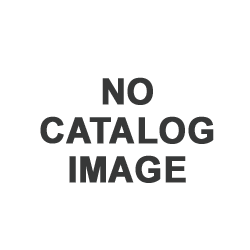
<style>
.page{position:relative;width:250px;height:250px;background:#ffffff}
.page>*{position:absolute;margin:0}
.t1{font:36px/39px "Arial-BoldMT";color:#373838;font-weight:bold}
</style>
<div class="page">
<p class="t1" style="left:40px;top:77px;width:174px;height:106px;text-align:center">NO<br>CATALOG<br>IMAGE</p>
</div>
